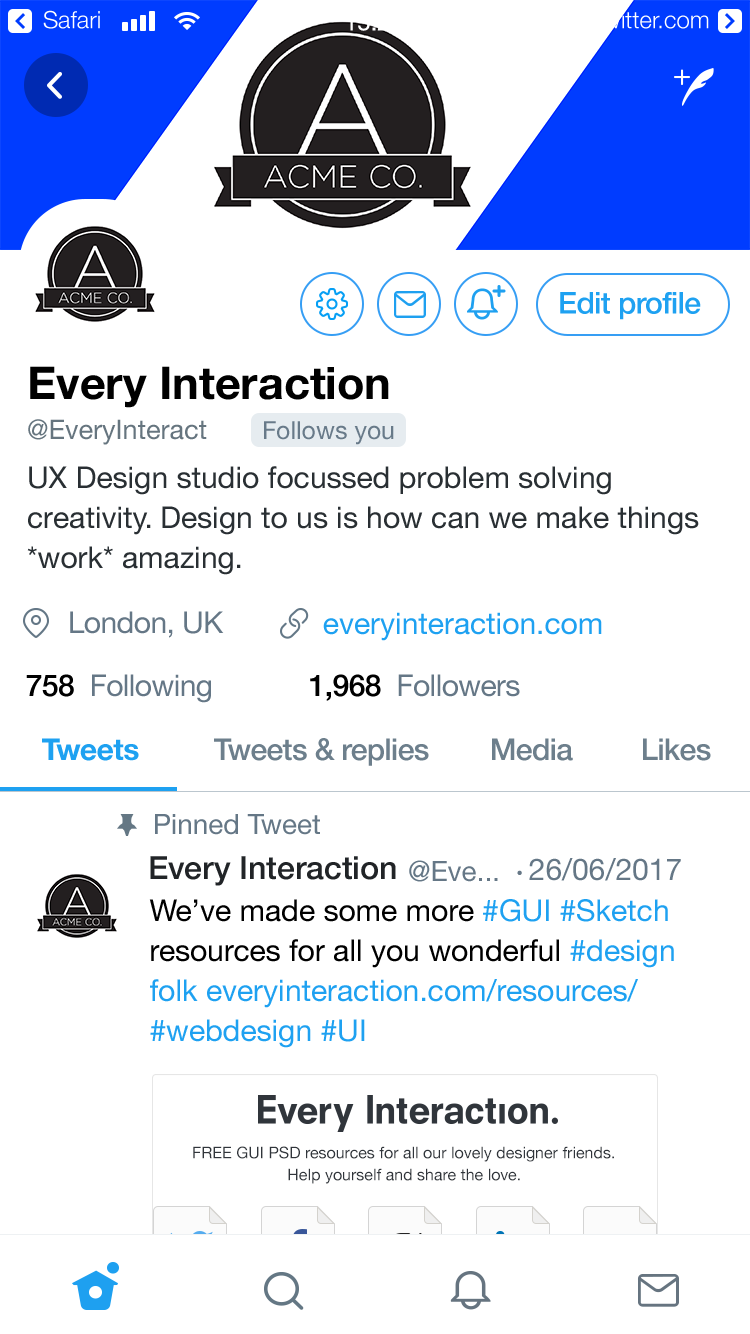
<style>
.page{position:relative;width:750px;height:1334px;background:#ffffff}
.page>*{position:absolute;margin:0}
.t1{font:24px "HelveticaNeue-Light";color:#ffffff}
.t2{font:30px "HelveticaNeue-Medium";letter-spacing:-0.02em;color:#1ea1f1}
.t3{font:30px/40px "HelveticaNeue";color:#292f33}
.t4{font:45px/40px "HelveticaNeue-Bold";color:#000000}
.t5{font:27px/40px "HelveticaNeue";color:#66757f}
.t6{font:25px/40px "HelveticaNeue";color:#677989}
.t7{font:30px "HelveticaNeue";letter-spacing:-0.02em;color:#657786}
.t8{font:30px "HelveticaNeue";color:#1ea1f1}
.t9{font:30px "HelveticaNeue-Medium";letter-spacing:-0.02em;color:#000000}
.t10{font:30px "HelveticaNeue-Bold";letter-spacing:-0.02em;color:#1ea1f1}
.t11{font:30px "HelveticaNeue-Medium";letter-spacing:-0.02em;color:#6d7f8c}
.t12{font:28px "HelveticaNeue";color:#657786}
.t13{font:32px "HelveticaNeue-Medium";color:#212427}
.t14{font:30px "HelveticaNeue";color:#657786}
.t15{font:20px "HelveticaNeue";color:#657786}
.t16{font:30px/40px "HelveticaNeue";color:#1ea1f1}
.t17{font:30px/40px "HelveticaNeue";color:#000000}
</style>
<div class="page">
<p class="t1" style="left:43px;top:10px;width:57px;height:19px">Safari</p>
<p class="t1" style="left:596px;top:11px;width:113px;height:18px">twitter.com</p>
<p class="t2" style="left:560px;top:292px;width:141px;height:28px">Edit profile</p>
<p class="t3" style="left:27px;top:366px;width:672px;height:209px"><span class="t4">Every Interaction<br></span><span class="t5">@EveryInteract       </span><span class="t6">Follows you<br></span>UX Design studio focussed problem solving creativity. Design to us is how can we make things *work* amazing.</p>
<p class="t7" style="left:70px;top:611px;width:154px;height:27px">London, UK</p>
<p class="t8" style="left:323px;top:612px;width:279px;height:29px">everyinteraction.com</p>
<p class="t7" style="left:26px;top:674px;width:185px;height:29px"><span class="t9">758</span>  Following</p>
<p class="t7" style="left:310px;top:674px;width:210px;height:27px"><span class="t9">1,968</span>  Followers</p>
<p class="t10" style="left:42px;top:738px;width:97px;height:23px">Tweets</p>
<p class="t11" style="left:214px;top:738px;width:215px;height:28px">Tweets &amp; replies</p>
<p class="t11" style="left:492px;top:738px;width:81px;height:23px">Media</p>
<p class="t11" style="left:643px;top:738px;width:68px;height:23px">Likes</p>
<p class="t12" style="left:155px;top:814px;width:165px;height:21px">Pinned Tweet</p>
<p class="t13" style="left:150px;top:856px;width:246px;height:30px">Every Interaction</p>
<p class="t12" style="left:409px;top:860px;width:89px;height:22px">@Eve...</p>
<p class="t14" style="left:517px;top:858px;width:164px;height:23px"><span class="t15">• </span>26/06/2017</p>
<p class="t16" style="left:149px;top:899px;width:525px;height:149px"><span class="t17">We’ve made some more </span>#GUI #Sketch<span class="t17"> resources for all you wonderful </span>#design folk everyinteraction.com/resources/ #webdesign #UI</p>
</div>
